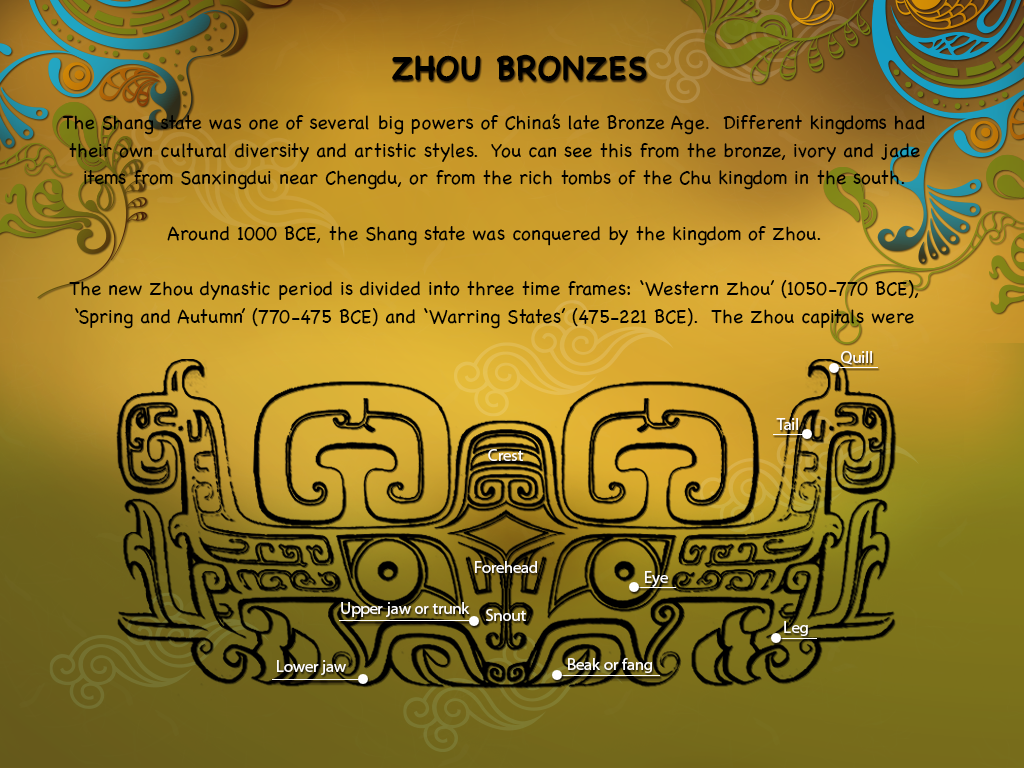
<style>
.page{position:relative;width:1024px;height:768px}
.page>*{position:absolute;margin:0}
.t1{font:33.3px "Chalkboard-Bold";color:#000000;text-transform:uppercase}
.t2{font:19.4px/27.8px "Chalkboard";color:#000000}
</style>
<div class="page">
<p class="t1" style="left:392px;top:54px;width:255px;height:27px">Zhou Bronzes</p>
<p class="t2" style="left:62px;top:114px;width:863px;height:215px;text-align:center">The Shang state was one of several big powers of China’s late Bronze Age.  Different kingdoms had their own cultural diversity and artistic styles.  You can see this from the bronze, ivory and jade items from Sanxingdui near Chengdu, or from the rich tombs of the Chu kingdom in the south. <br><br>Around 1000 BCE, the Shang state was conquered by the kingdom of Zhou. <br><br>The new Zhou dynastic period is divided into three time frames: ‘Western Zhou’ (1050-770 BCE), ‘Spring and Autumn’ (770-475 BCE) and ‘Warring States’ (475-221 BCE).  The Zhou capitals were clusters of settlements around a royal palace.  The palaces were built on a rammed-earth platform with wooden frames and ceramic roof tiles. <br><br>Zhou ritual bronzes were developed from Shang bronze types and were used in similar ways.  For example, long inscriptions recorded special events.  The decoration became stiffer, and the taotie motif, a dragon-like mask, continued to be a typical symbol developed from the Neolithic culture.</p>
</div>
